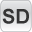
<style>
.page{position:relative;width:32px;height:32px}
.page>*{position:absolute;margin:0}
.t1{font:20px "Arial-BoldMT";color:#343434}
</style>
<div class="page">
<p class="t1" style="left:2px;top:8px;width:27px;height:16px">SD</p>
</div>
